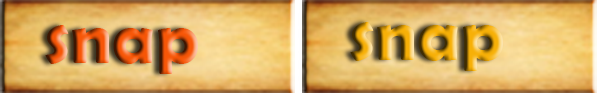
<style>
.page{position:relative;width:597px;height:97px}
.page>*{position:absolute;margin:0}
.t1{font:74px "BerlinSansFBDemi-Bold"}
</style>
<div class="page">
<p class="t1" style="left:45px;top:25px;width:153px;height:49px">snap</p>
<p class="t1" style="left:350px;top:22px;width:153px;height:49px">snap</p>
</div>
